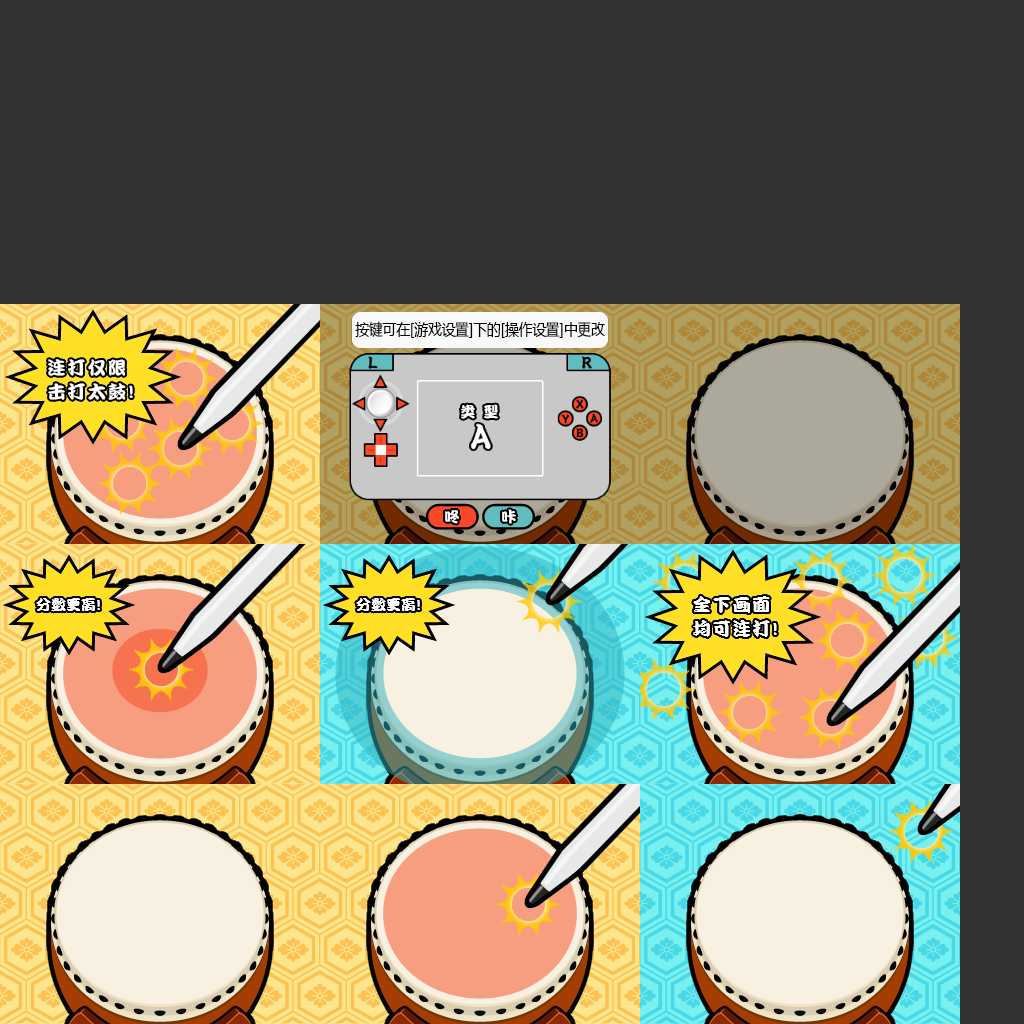
<style>
.page{position:relative;width:1024px;height:1024px;background:#333333}
.page>*{position:absolute;margin:0}
.t1{font:16px "MicrosoftYaHei";color:#000000;scale:0.85 1}
.t2{font:18px/24px "DFPKanTingLiuW9";letter-spacing:0.1em;color:#ffffff}
.t3{font:15px "DFPKanTingLiuW9";letter-spacing:0.1em;color:#ffffff}
.t4{font:15px "DFPKanTingLiuW9";color:#ffffff}
</style>
<div class="page">
<p class="t1" style="left:355px;top:321px;width:250px;height:17px">按键可在[游戏设置]下的[操作设置]中更改</p>
<p class="t2" style="left:48px;top:359px;width:85px;height:41px">连打仅限<br>击打太鼓!</p>
<p class="t3" style="left:461px;top:404px;width:37px;height:15px">类 型</p>
<p class="t3" style="left:445px;top:510px;width:14px;height:14px">咚</p>
<p class="t3" style="left:502px;top:509px;width:14px;height:15px">咔</p>
<p class="t4" style="left:36px;top:598px;width:64px;height:14px">分数更高!</p>
<p class="t4" style="left:356px;top:598px;width:64px;height:14px">分数更高!</p>
<p class="t2" style="left:693px;top:596px;width:84px;height:41px">全下画面<br>均可连打!</p>
</div>
